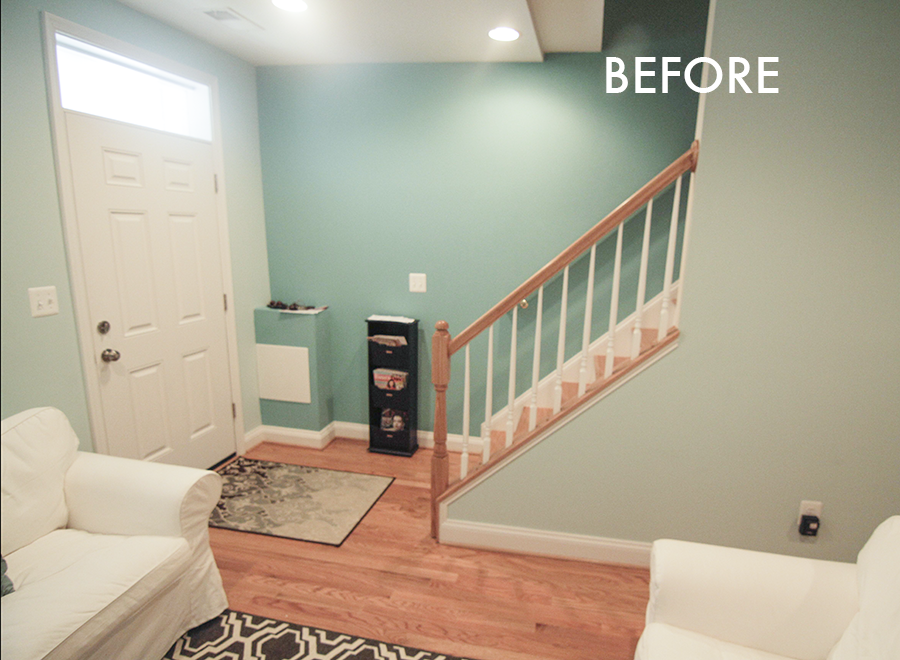
<style>
.page{position:relative;width:900px;height:660px}
.page>*{position:absolute;margin:0}
.t1{font:48px "Futura-Medium";color:#ffffff}
</style>
<div class="page">
<p class="t1" style="left:606px;top:57px;width:173px;height:36px">BEFORE</p>
</div>
